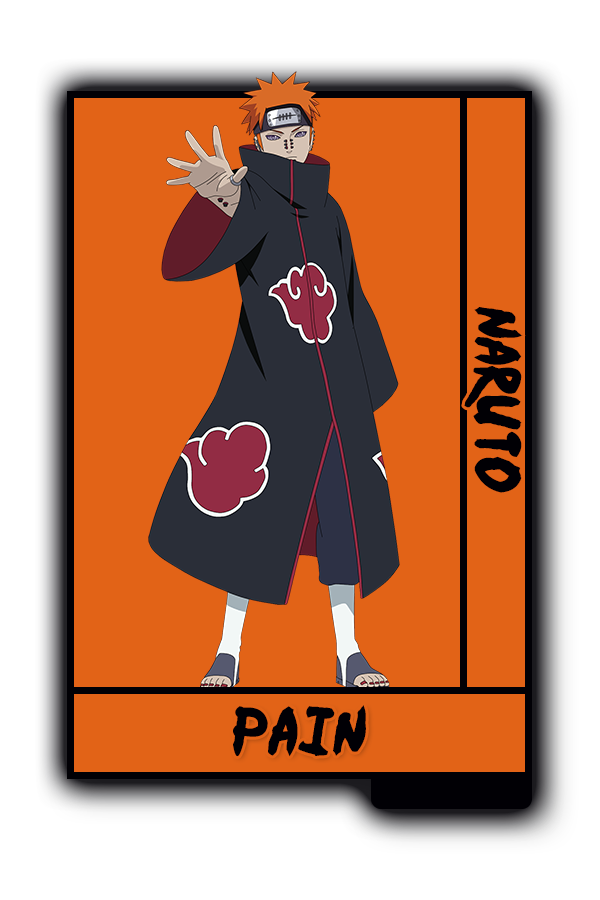
<style>
.page{position:relative;width:600px;height:900px;background:#e26317}
.page>*{position:absolute;margin:0}
.t1{font:52px "Ninja-Naruto";color:#010005}
.t2{font:55.4px "Ninja-Naruto";color:#010005}
</style>
<div class="page">
<p class="t1" style="left:464px;top:307px;width:59px;height:186px;rotate:90deg">Naruto</p>
<p class="t2" style="left:233px;top:705px;width:133px;height:52px">Pain</p>
</div>
